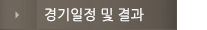
<style>
.page{position:relative;width:207px;height:30px}
.page>*{position:absolute;margin:0}
.t1{font:14px "NanumGothic";color:#ffffff}
</style>
<div class="page">
<p class="t1" style="left:45px;top:8px;width:99px;height:14px">경기일정 및 결과</p>
</div>
